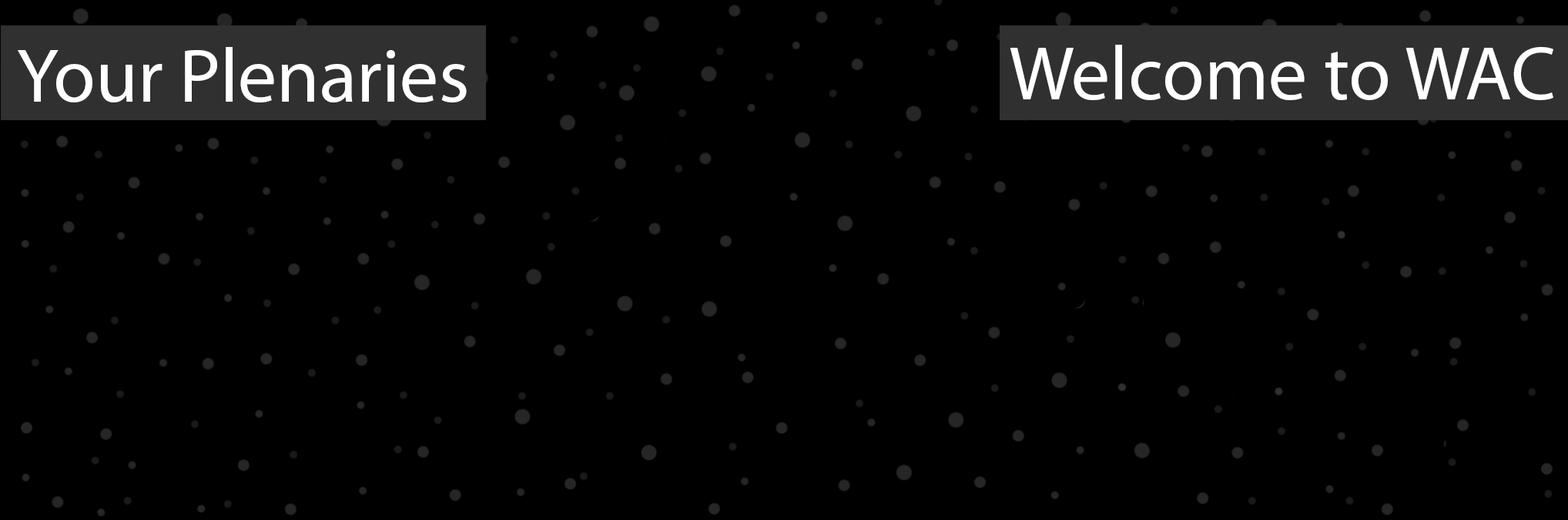
<style>
.page{position:relative;width:1568px;height:520px;background:#000000}
.page>*{position:absolute;margin:0}
.t1{font:77px "MyriadPro-Regular";color:#ffffff}
</style>
<div class="page">
<p class="t1" style="left:18px;top:47px;width:449px;height:55px">Your Plenaries</p>
<p class="t1" style="left:1010px;top:45px;width:543px;height:55px">Welcome to WAC</p>
</div>
